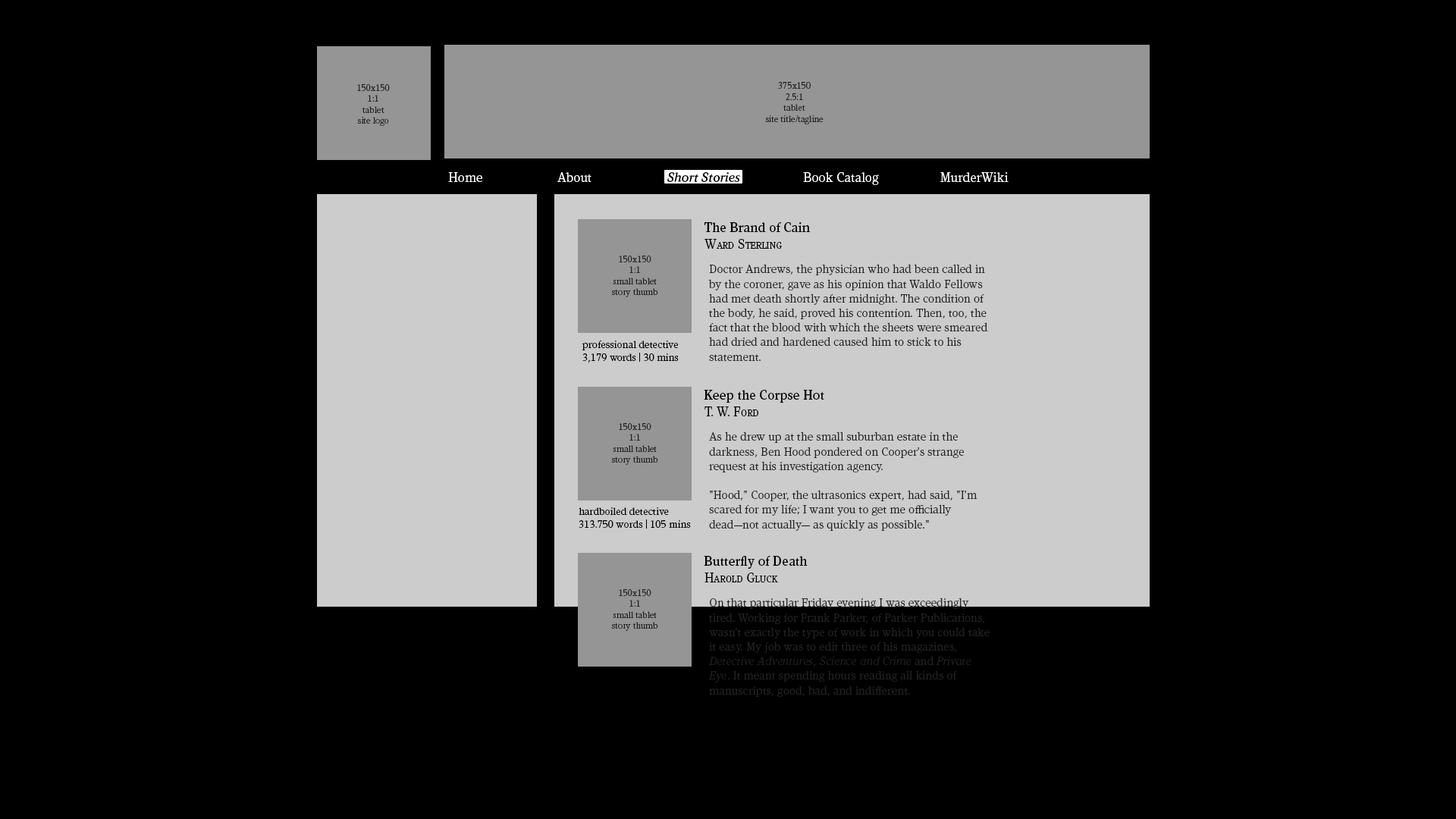
<style>
.page{position:relative;width:1456px;height:819px;background:#000000}
.page>*{position:absolute;margin:0}
.t1{font:9.1px "Kandal-Book";color:#222222}
.t2{font:13.6px "Kandal-Book";color:#ffffff}
.t3{font:13.6px "Kandal-MediumItalic";color:#000000}
.t4{font:13.6px "Kandal-Medium";color:#000000}
.t5{font:13.6px "Kandal-Book";color:#000000;font-variant:small-caps}
.t6{font:12.1px "Kandal-Book";color:#222222}
.t7{font:10.6px "Kandal-Book";color:#000000}
</style>
<div class="page">
<p class="t1" style="left:357px;top:84px;width:33px;height:42px;text-align:center">150x150<br>1:1<br>tablet<br>site logo</p>
<p class="t1" style="left:765px;top:82px;width:59px;height:42px;text-align:center">375x150<br>2.5:1<br>tablet<br>site title/tagline</p>
<p class="t2" style="left:448px;top:172px;width:561px;height:13px">Home   About   <span class="t3">Short Stories   </span>Book Catalog   MurderWiki</p>
<p class="t4" style="left:704px;top:222px;width:106px;height:10px">The Brand of Cain</p>
<p class="t5" style="left:704px;top:239px;width:79px;height:10px">Ward Sterling</p>
<p class="t1" style="left:611px;top:256px;width:47px;height:41px;text-align:center">150x150<br>1:1<br>small tablet<br>story thumb</p>
<p class="t6" style="left:708px;top:264px;width:280px;height:97px">Doctor Andrews, the physician who had been called in by the coroner, gave as his opinion that Waldo Fellows had met death shortly after midnight. The condition of the body, he said, proved his contention. Then, too, the fact that the blood with which the sheets were smeared had dried and hardened caused him to stick to his statement.</p>
<p class="t7" style="left:582px;top:340px;width:97px;height:22px">professional detective<br>3,179 words | 30 mins</p>
<p class="t4" style="left:704px;top:390px;width:120px;height:13px">Keep the Corpse Hot</p>
<p class="t5" style="left:704px;top:406px;width:54px;height:10px">T. W. Ford</p>
<p class="t1" style="left:611px;top:423px;width:47px;height:42px;text-align:center">150x150<br>1:1<br>small tablet<br>story thumb</p>
<p class="t6" style="left:709px;top:431px;width:268px;height:100px">As he drew up at the small suburban estate in the darkness, Ben Hood pondered on Cooper's strange request at his investigation agency. <br><br>"Hood," Cooper, the ultrasonics expert, had said, "I'm scared for my life; I want you to get me officially dead—not actually— as quickly as possible."</p>
<p class="t7" style="left:579px;top:507px;width:112px;height:22px">hardboiled detective<br>313.750 words | 105 mins</p>
<p class="t4" style="left:704px;top:556px;width:104px;height:13px">Butterfly of Death</p>
<p class="t5" style="left:704px;top:573px;width:74px;height:9px">Harold Gluck</p>
<p class="t1" style="left:611px;top:589px;width:47px;height:42px;text-align:center">150x150<br>1:1<br>small tablet<br>story thumb</p>
</div>
